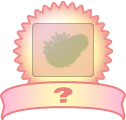
<style>
.page{position:relative;width:126px;height:120px;background:#ffffff}
.page>*{position:absolute;margin:0}
.t1{font:19.5px "Arial-Black";letter-spacing:0.045em;color:#e98181;text-transform:uppercase}
</style>
<div class="page">
<p class="t1" style="left:54px;top:87px;width:19px;height:16px">?</p>
</div>
